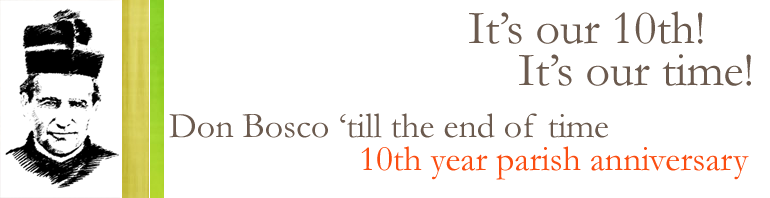
<style>
.page{position:relative;width:770px;height:198px;background:#ffffff}
.page>*{position:absolute;margin:0}
.t1{font:48px "Garamond";color:#6b5a4e}
.t2{font:36px "Garamond";color:#6b5a4e}
.t3{font:36px "Garamond";color:#fb4d11}
</style>
<div class="page">
<p class="t1" style="left:469px;top:11px;width:234px;height:33px">It’s our 10th!</p>
<p class="t1" style="left:519px;top:54px;width:232px;height:32px">It’s our time!</p>
<p class="t2" style="left:169px;top:113px;width:439px;height:25px">Don Bosco ‘till the end of time</p>
<p class="t3" style="left:361px;top:146px;width:388px;height:34px">10th year parish anniversary</p>
</div>
